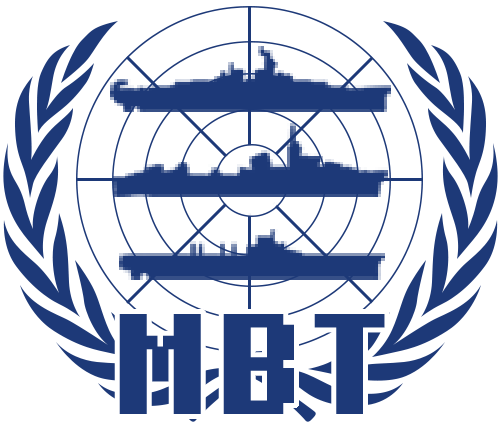
<style>
.page{position:relative;width:500px;height:426px;background:#ffffff}
.page>*{position:absolute;margin:0}
.t1{font:172.7px "Fixedsys";letter-spacing:0.1em;color:#1d3978;font-weight:bold}
</style>
<div class="page">
<p class="t1" style="left:119px;top:314px;width:175px;height:100px">MB</p>
<p class="t1" style="left:314px;top:314px;width:71px;height:100px">T</p>
</div>
